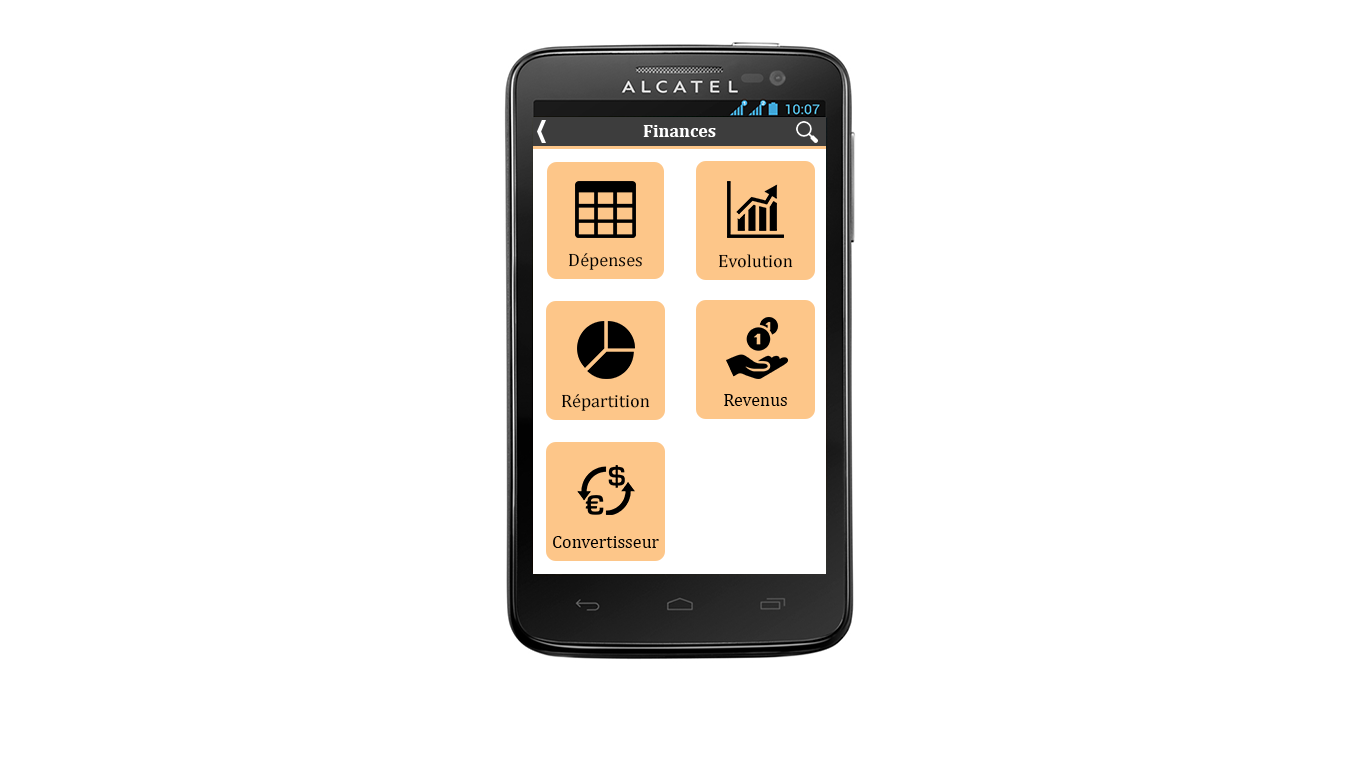
<style>
.page{position:relative;width:1366px;height:768px;background:#ffffff}
.page>*{position:absolute;margin:0}
.t1{font:18px "Cambria-Bold";color:#ffffff}
.t2{font:18px "Cambria";color:#000000}
</style>
<div class="page">
<p class="t1" style="left:643px;top:125px;width:73px;height:12px">Finances</p>
<p class="t2" style="left:569px;top:253px;width:73px;height:17px">Dépenses</p>
<p class="t2" style="left:719px;top:254px;width:74px;height:14px">Evolution</p>
<p class="t2" style="left:562px;top:394px;width:88px;height:17px">Répartition</p>
<p class="t2" style="left:724px;top:394px;width:63px;height:12px">Revenus</p>
<p class="t2" style="left:553px;top:536px;width:106px;height:12px">Convertisseur</p>
</div>
